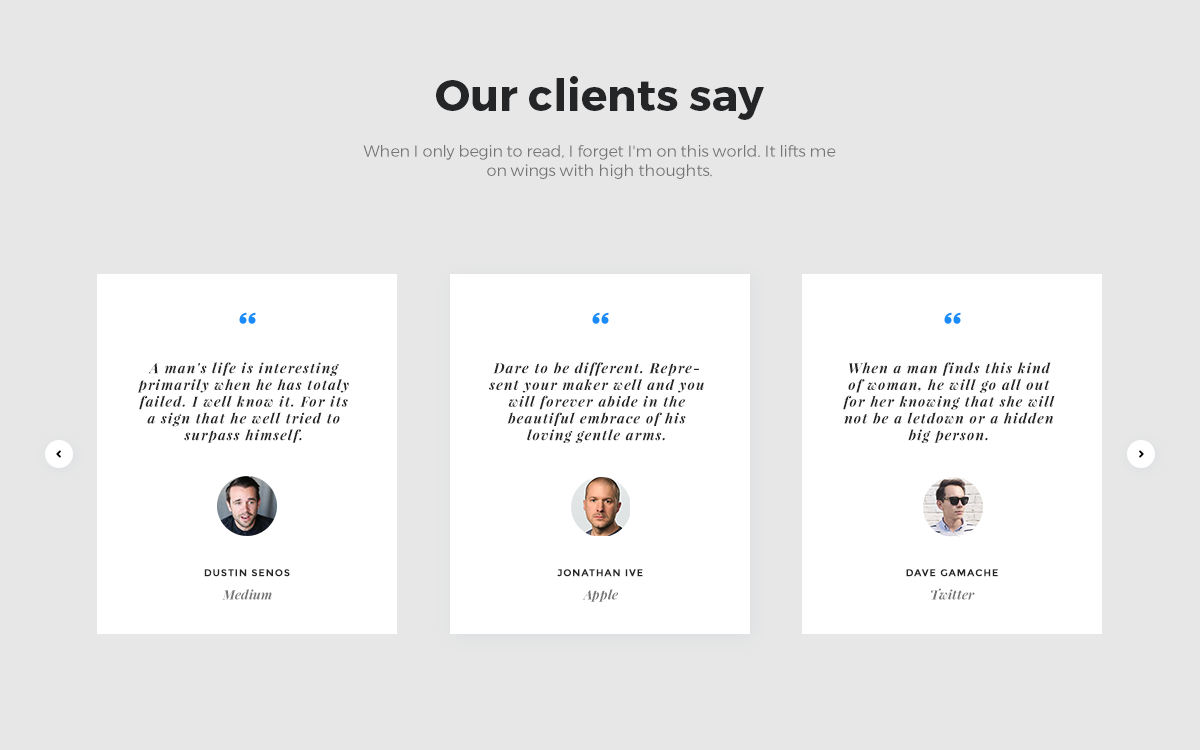
<style>
.page{position:relative;width:1200px;height:750px;background:#e7e7e7}
.page>*{position:absolute;margin:0}
.t1{font:44px "Montserrat-Bold";color:#242526}
.t2{font:16px "Montserrat-Light";color:#747474}
.t3{font:14px "PlayfairDisplay-BoldItalic";letter-spacing:0.08em;color:#242526}
.t4{font:10px "Montserrat-Bold";letter-spacing:0.08em;color:#242526;text-transform:uppercase}
.t5{font:13px "PlayfairDisplay-BoldItalic";color:#747474}
</style>
<div class="page">
<p class="t1" style="left:436px;top:76px;width:328px;height:44px">Our clients say</p>
<p class="t2" style="left:363px;top:145px;width:473px;height:34px;text-align:center">When I only begin to read, I forget I'm on this world. It lifts me on wings with high thoughts.</p>
<p class="t3" style="left:137px;top:362px;width:212px;height:81px;text-align:center">A man's life is interesting primarily when he has totaly failed. I well know it. For its a sign that he well tried to surpass himself.</p>
<p class="t3" style="left:489px;top:362px;width:215px;height:81px;text-align:center">Dare to be different. Represent your maker well and you will forever abide in the beautiful embrace of his loving gentle arms.</p>
<p class="t3" style="left:843px;top:362px;width:212px;height:81px;text-align:center">When a man finds this kind of woman, he will go all out for her knowing that she will not be a letdown or a hidden big person.</p>
<p class="t4" style="left:204px;top:569px;width:86px;height:8px">dustin senos</p>
<p class="t4" style="left:557px;top:569px;width:86px;height:8px">Jonathan Ive</p>
<p class="t4" style="left:906px;top:569px;width:92px;height:8px">Dave Gamache</p>
<p class="t5" style="left:222px;top:589px;width:50px;height:11px">Medium</p>
<p class="t5" style="left:582px;top:589px;width:36px;height:13px">Apple</p>
<p class="t5" style="left:931px;top:588px;width:44px;height:12px">Twitter</p>
</div>
